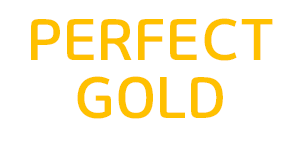
<style>
.page{position:relative;width:300px;height:150px;background:#ffffff}
.page>*{position:absolute;margin:0}
.t1{font:58.3px/58.3px "GyeonggiTitleMOTF";color:#ffc000}
</style>
<div class="page">
<p class="t1" style="left:31px;top:18px;width:242px;height:101px;text-align:center">PERFECT<br>GOLD</p>
</div>
